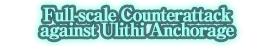
<style>
.page{position:relative;width:274px;height:46px;background:#ffffff}
.page>*{position:absolute;margin:0}
.t1{font:18px/15px "RyuminPro-ExBold";letter-spacing:-0.08em;color:#a5ffef;font-weight:bold}
</style>
<div class="page">
<p class="t1" style="left:40px;top:7px;width:194px;height:33px;text-align:center">Full-scale Counterattack<br>against Ulithi Anchorage</p>
</div>
